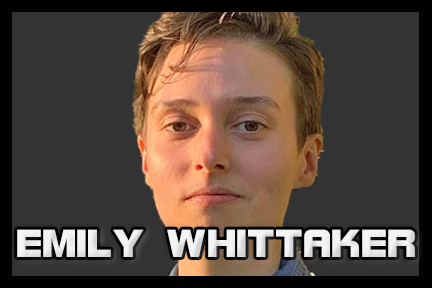
<style>
.page{position:relative;width:432px;height:288px;background:#333333}
.page>*{position:absolute;margin:0}
.t1{font:41.7px "BolsterBold";color:#f3f3f3}
</style>
<div class="page">
<p class="t1" style="left:17px;top:229px;width:398px;height:28px">EMILY WHITTAKER</p>
</div>
